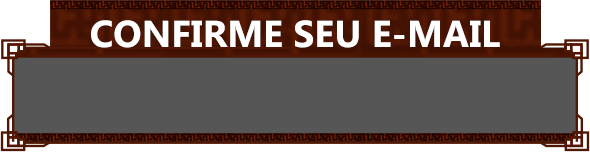
<style>
.page{position:relative;width:590px;height:152px;background:#565656}
.page>*{position:absolute;margin:0}
.t1{font:37.5px "Ebrima-Bold";color:#ffffff}
</style>
<div class="page">
<p class="t1" style="left:91px;top:20px;width:409px;height:28px">CONFIRME SEU E-MAIL</p>
</div>
